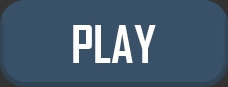
<style>
.page{position:relative;width:228px;height:87px;background:#385168}
.page>*{position:absolute;margin:0}
.t1{font:50px "AgencyFB-Bold";color:#ffffff}
</style>
<div class="page">
<p class="t1" style="left:73px;top:25px;width:83px;height:38px">PLAY</p>
</div>
